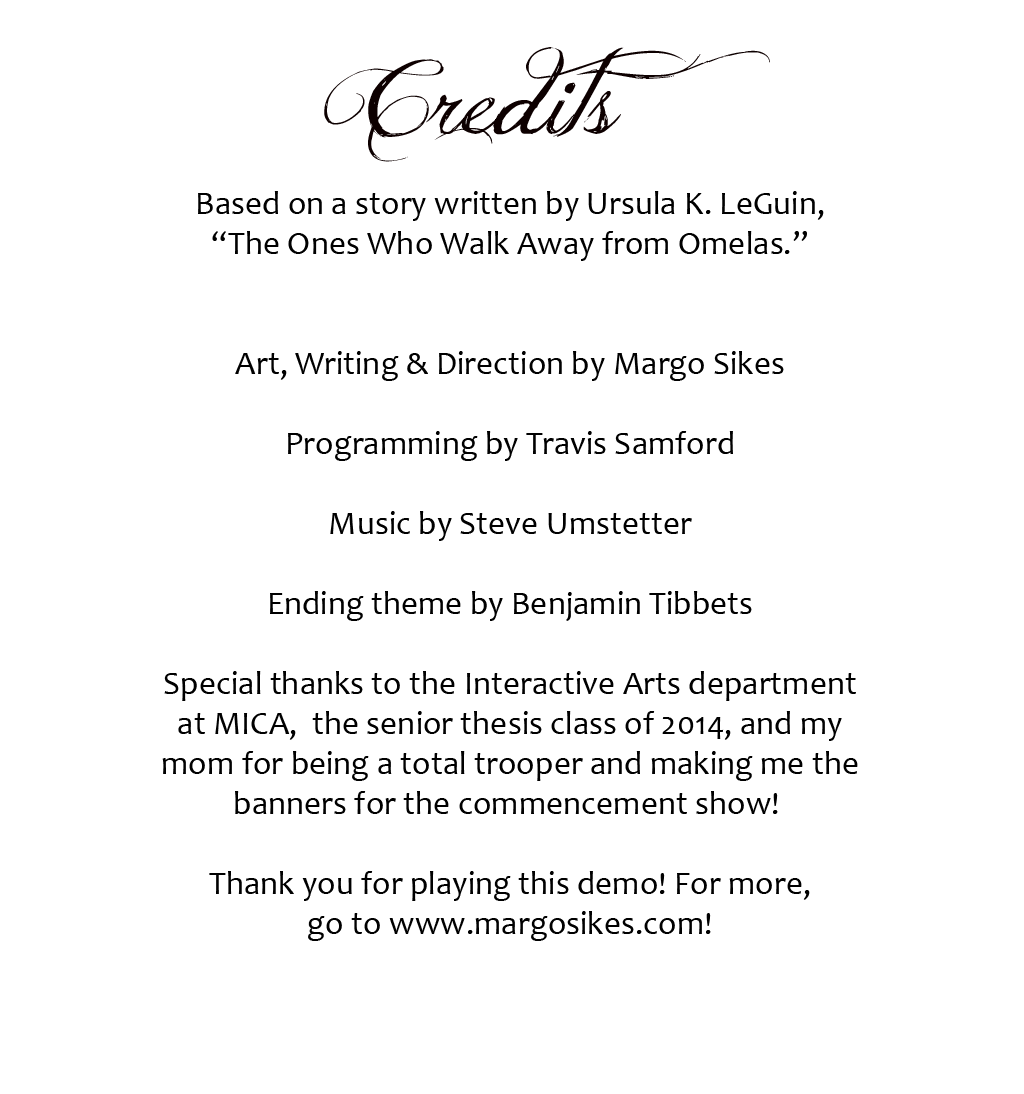
<style>
.page{position:relative;width:1024px;height:1094px;background:#ffffff}
.page>*{position:absolute;margin:0}
.t1{font:100px "JellykaDeliciousCake";color:#0d0000}
.t2{font:33.3px "Candara";color:#000000}
</style>
<div class="page">
<p class="t1" style="left:324px;top:47px;width:446px;height:115px">Credits</p>
<p class="t2" style="left:162px;top:191px;width:696px;height:750px;text-align:center">Based on a story written by Ursula K. LeGuin,<br>“The Ones Who Walk Away from Omelas.”<br><br><br>Art, Writing &amp; Direction by Margo Sikes<br><br>Programming by Travis Samford<br><br>Music by Steve Umstetter<br><br>Ending theme by Benjamin Tibbets<br><br>Special thanks to the Interactive Arts department<br>at MICA,  the senior thesis class of 2014, and my<br>mom for being a total trooper and making me the<br>banners for the commencement show! <br><br>Thank you for playing this demo! For more,<br>go to www.margosikes.com!</p>
</div>
